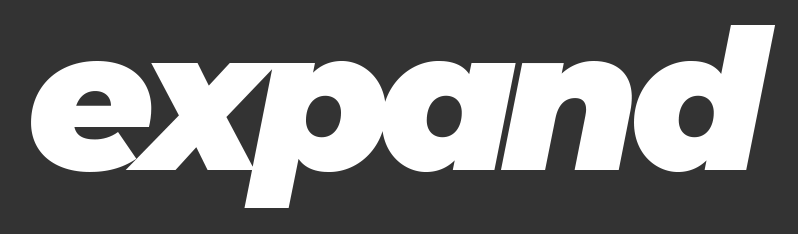
<style>
.page{position:relative;width:798px;height:234px;background:#333333}
.page>*{position:absolute;margin:0}
.t1{font:195px "Montserrat-BlackItalic";letter-spacing:-0.06em;color:#ffffff}
</style>
<div class="page">
<p class="t1" style="left:31px;top:25px;width:745px;height:183px">expand</p>
</div>
